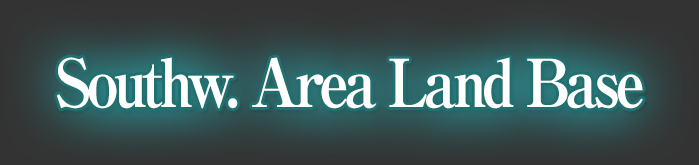
<style>
.page{position:relative;width:699px;height:165px}
.page>*{position:absolute;margin:0}
.t1{font:66px "RyuminPro-ExBold";letter-spacing:-0.08em;color:#ffffff;scale:0.9 1}
</style>
<div class="page">
<p class="t1" style="left:57px;top:57px;width:586px;height:52px">Southw. Area Land Base</p>
</div>
